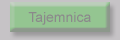
<style>
.page{position:relative;width:120px;height:40px;background:#94c591}
.page>*{position:absolute;margin:0}
.t1{font:14px "ArialMT";color:#8b898b}
</style>
<div class="page">
<p class="t1" style="left:28px;top:12px;width:63px;height:13px">Tajemnica</p>
</div>
